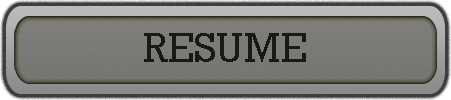
<style>
.page{position:relative;width:451px;height:100px}
.page>*{position:absolute;margin:0}
.t1{font:41.7px "Rockwell";color:#1a1a1a}
</style>
<div class="page">
<p class="t1" style="left:144px;top:33px;width:162px;height:29px">RESUME</p>
</div>
